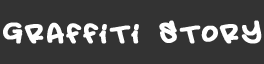
<style>
.page{position:relative;width:264px;height:64px;background:#333333}
.page>*{position:absolute;margin:0}
.t1{font:42px "AmsterdamGraffiti";letter-spacing:0.12em;color:#ffffff;font-weight:bold}
</style>
<div class="page">
<p class="t1" style="left:3px;top:20px;width:259px;height:24px">Graffiti Story</p>
</div>
